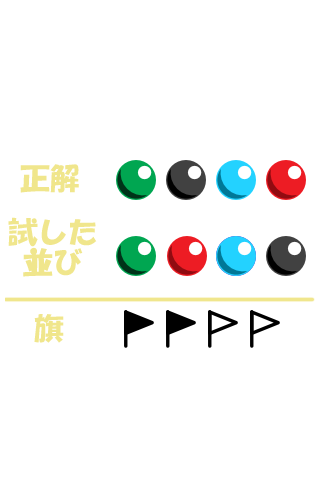
<style>
.page{position:relative;width:320px;height:480px;background:#ffffff}
.page>*{position:absolute;margin:0}
.t1{font:30px "HGSSoeiKakupoptai";color:#f0e68c}
.t2{font:30px/30px "HGSSoeiKakupoptai";color:#f0e68c}
</style>
<div class="page">
<p class="t1" style="left:20px;top:164px;width:59px;height:29px">正解</p>
<p class="t2" style="left:8px;top:217px;width:89px;height:60px;text-align:center">試した<br>並び</p>
<p class="t1" style="left:34px;top:314px;width:30px;height:29px">旗</p>
</div>
